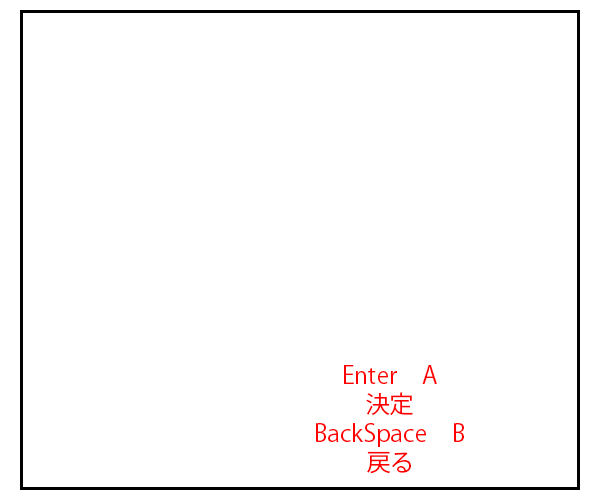
<style>
.page{position:relative;width:600px;height:500px;background:#ffffff}
.page>*{position:absolute;margin:0}
.t1{font:24px "KozGoPr6N-Regular";color:#ff0000}
</style>
<div class="page">
<p class="t1" style="left:316px;top:365px;width:148px;height:109px;text-align:center">Enter　A<br>決定<br>BackSpace　B<br>戻る</p>
</div>
